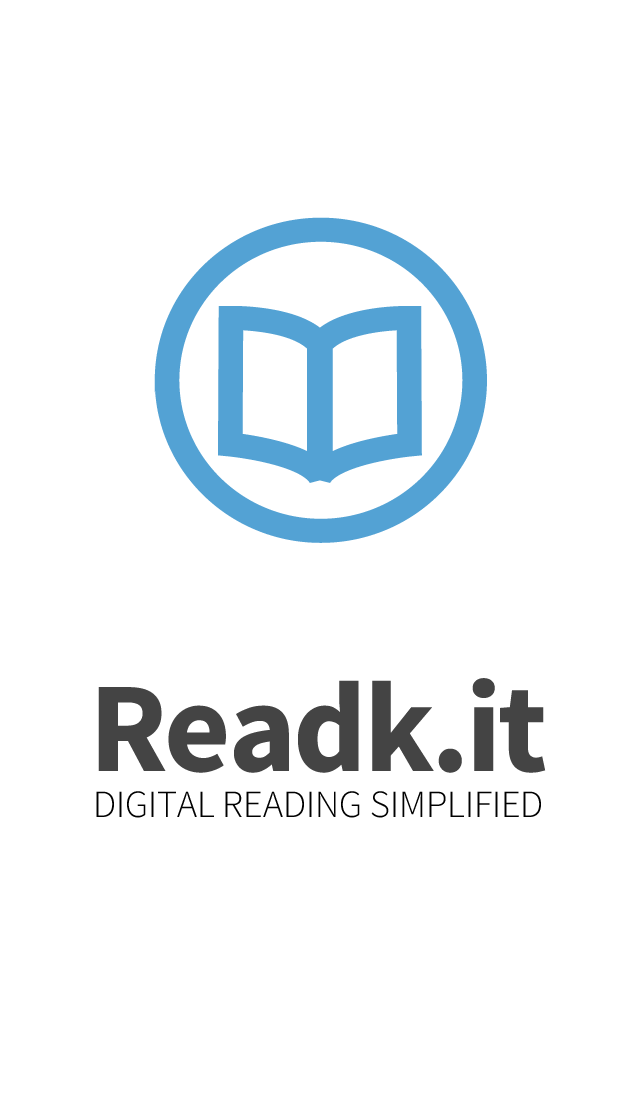
<style>
.page{position:relative;width:640px;height:1096px;background:#ffffff}
.page>*{position:absolute;margin:0}
.t1{font:38.5px "SourceSansPro-Light";color:#000000;text-transform:uppercase}
.t2{font:128.4px "SourceSansPro-Bold";letter-spacing:-0.025em;color:#444444}
</style>
<div class="page">
<p class="t1" style="left:96px;top:678px;width:450px;height:140px;text-align:center"><span class="t2">Readk.it<br></span>DIGITAL READING SIMPLIFIED</p>
</div>
